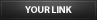
<style>
.page{position:relative;width:97px;height:20px}
.page>*{position:absolute;margin:0}
.t1{font:10px "Myriad-Bold";letter-spacing:-0.025em;color:#ffffff}
</style>
<div class="page">
<p class="t1" style="left:25px;top:6px;width:47px;height:7px">YOUR LINK</p>
</div>
